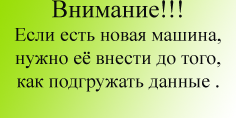
<style>
.page{position:relative;width:236px;height:118px}
.page>*{position:absolute;margin:0}
.t1{font:19.4px "TimesNewRomanPSMT";color:#0a0a0d}
.t2{font:25px "TimesNewRomanPSMT";color:#0a0a0d}
</style>
<div class="page">
<p class="t1" style="left:14px;top:0px;width:207px;height:92px;text-align:center"><span class="t2">Внимание!!!<br></span>Если есть новая машина,   нужно её внести до того, как подгружать данные .</p>
</div>
